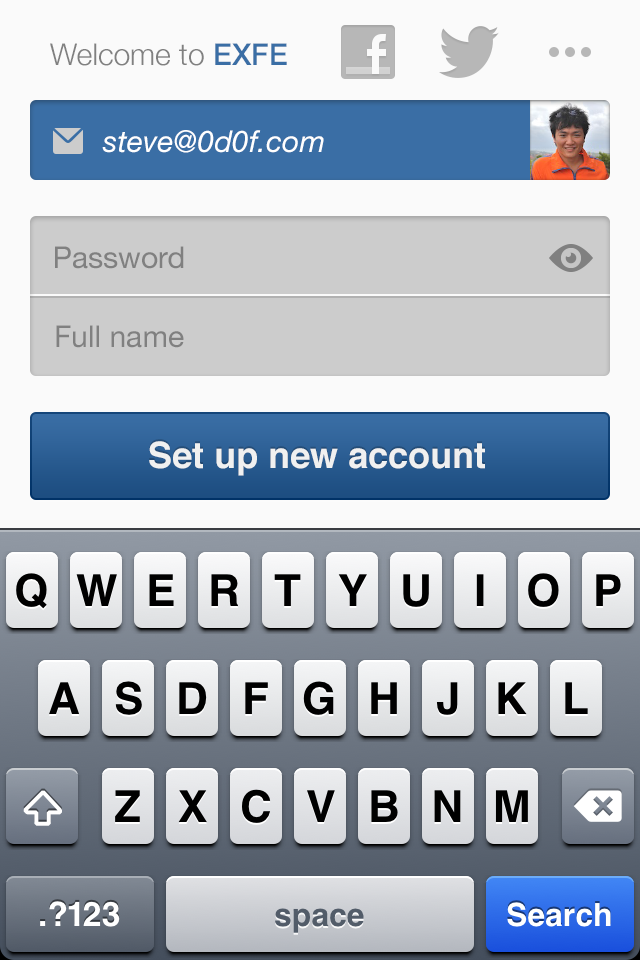
<style>
.page{position:relative;width:640px;height:960px;background:#fafafa}
.page>*{position:absolute;margin:0}
.t1{font:30px "HelveticaNeue-Light";color:#808080}
.t2{font:30px "HelveticaNeue-Medium";color:#3a6ea5}
.t3{font:30px "HelveticaNeue-Italic";color:#ffffff}
.t4{font:30px "HelveticaNeue";color:#808080}
.t5{font:36px "Helvetica-Bold";color:#f0f0f0}
</style>
<div class="page">
<p class="t1" style="left:50px;top:43px;width:237px;height:23px">Welcome to <span class="t2">EXFE</span></p>
<p class="t3" style="left:102px;top:130px;width:222px;height:23px">steve@0d0f.com</p>
<p class="t4" style="left:55px;top:246px;width:129px;height:23px">Password</p>
<p class="t4" style="left:56px;top:325px;width:128px;height:23px">Full name</p>
<p class="t5" style="left:149px;top:441px;width:336px;height:35px">Set up new account</p>
</div>
